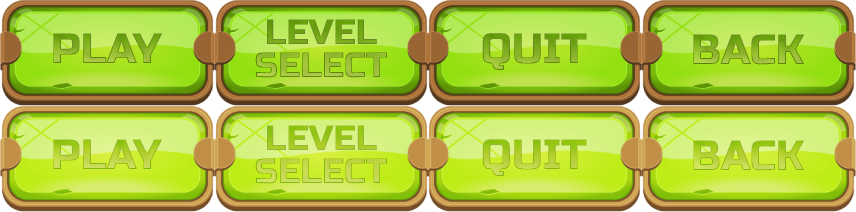
<style>
.page{position:relative;width:856px;height:212px}
.page>*{position:absolute;margin:0}
.t1{font:35px/33px "RussoOne-Regular"}
.t2{font:42px "RussoOne-Regular"}
</style>
<div class="page">
<p class="t1" style="left:255px;top:19px;width:133px;height:59px;text-align:center">LEVEL<br>SELECT</p>
<p class="t2" style="left:53px;top:33px;width:110px;height:30px">PLAY</p>
<p class="t2" style="left:482px;top:33px;width:105px;height:38px">QUIT</p>
<p class="t2" style="left:693px;top:34px;width:112px;height:31px">BACK</p>
<p class="t1" style="left:255px;top:125px;width:133px;height:59px;text-align:center">LEVEL<br>SELECT</p>
<p class="t2" style="left:53px;top:139px;width:110px;height:30px">PLAY</p>
<p class="t2" style="left:482px;top:139px;width:105px;height:38px">QUIT</p>
<p class="t2" style="left:693px;top:140px;width:112px;height:31px">BACK</p>
</div>
